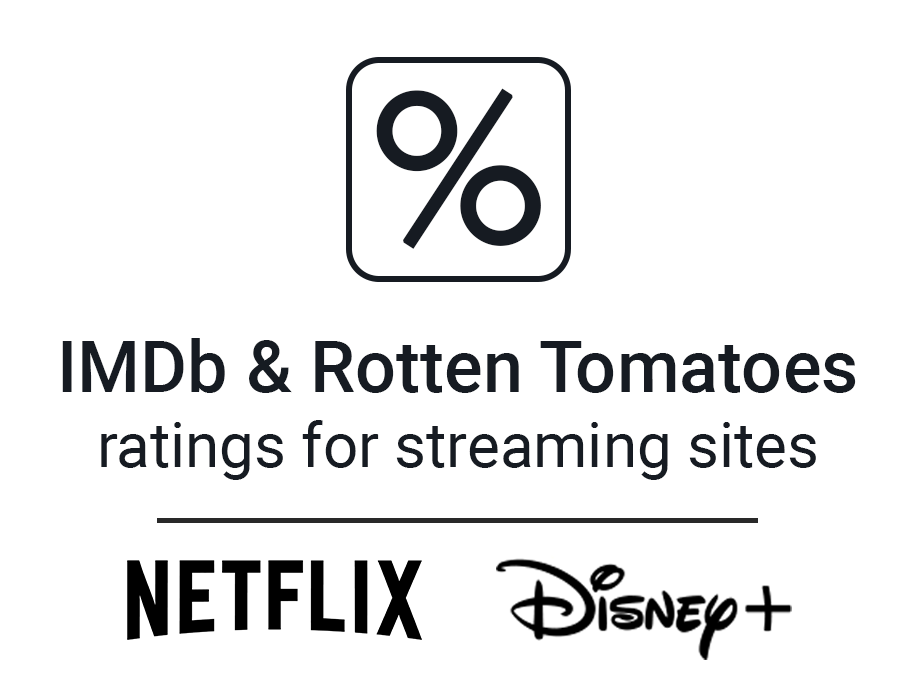
<style>
.page{position:relative;width:920px;height:680px;background:#ffffff}
.page>*{position:absolute;margin:0}
.t1{font:209.3px "Marcellus-Regular";color:#161b22;font-weight:bold}
.t2{font:61.8px/75px "Roboto-Regular";color:#161b22}
.t3{font:72.2px/103.1px "Roboto-Medium";color:#161b22}
</style>
<div class="page">
<p class="t1" style="left:376px;top:88px;width:165px;height:161px">%</p>
<p class="t2" style="left:62px;top:338px;width:794px;height:142px;text-align:center"><span class="t3">IMDb &amp; Rotten Tomatoes<br></span>ratings for streaming sites</p>
</div>
